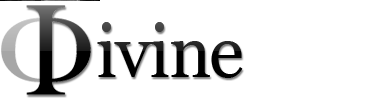
<style>
.page{position:relative;width:370px;height:100px;background:#ffffff}
.page>*{position:absolute;margin:0}
.t1{font:72px "Georgia";letter-spacing:-0.025em;color:#000000}
</style>
<div class="page">
<p class="t1" style="left:97px;top:22px;width:146px;height:56px">ivine</p>
</div>
